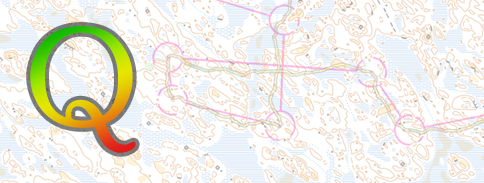
<style>
.page{position:relative;width:484px;height:183px;background:#ffffff}
.page>*{position:absolute;margin:0}
.t1{font:138.2px "PoorRichard-Regular"}
</style>
<div class="page">
<p class="t1" style="left:30px;top:26px;width:106px;height:127px">Q</p>
</div>
